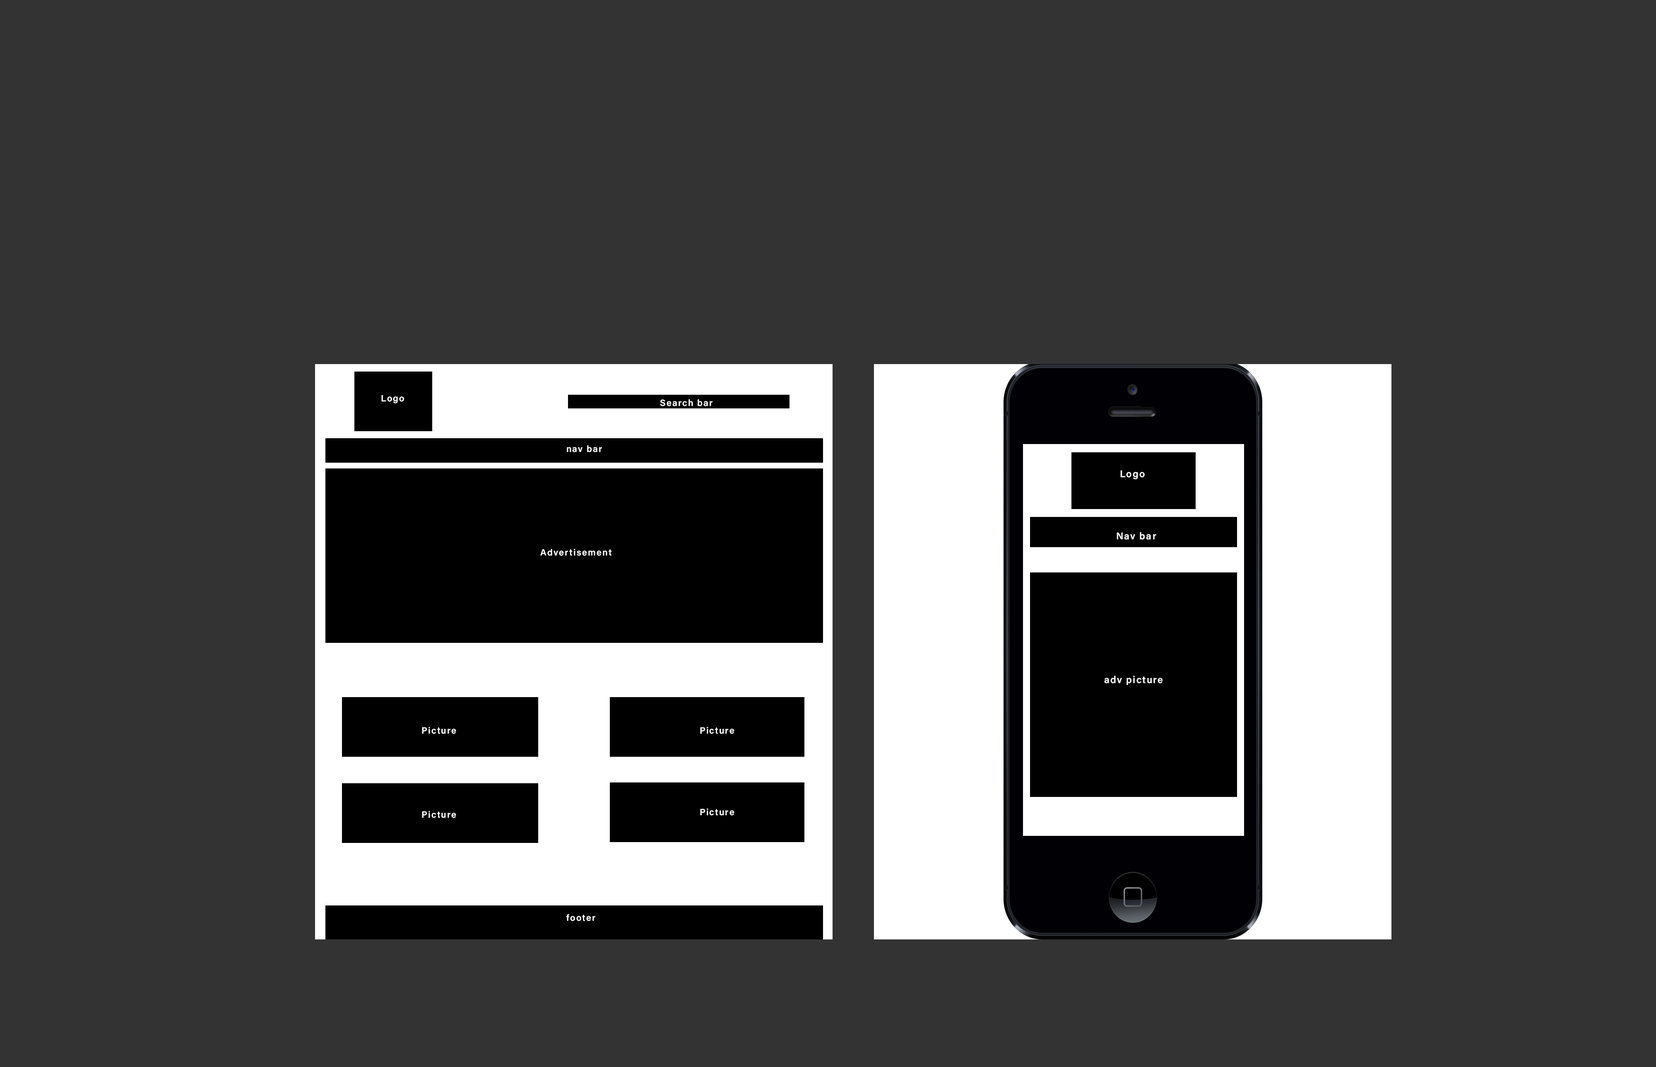
<style>
.page{position:relative;width:1656px;height:1067px;background:#333333}
.page>*{position:absolute;margin:0}
.t1{font:9px "AcuminConcept-Semibold";letter-spacing:0.1em;color:#ffffff}
.t2{font:9.7px "AcuminConcept-Semibold";letter-spacing:0.1em;color:#ffffff}
</style>
<div class="page">
<p class="t1" style="left:381px;top:395px;width:23px;height:8px">Logo</p>
<p class="t1" style="left:660px;top:399px;width:53px;height:7px">Search bar</p>
<p class="t1" style="left:567px;top:445px;width:35px;height:7px">nav bar</p>
<p class="t2" style="left:1120px;top:470px;width:25px;height:9px">Logo</p>
<p class="t2" style="left:1117px;top:532px;width:39px;height:7px">Nav bar</p>
<p class="t1" style="left:540px;top:549px;width:72px;height:7px">Advertisement</p>
<p class="t2" style="left:1104px;top:675px;width:59px;height:10px">adv picture</p>
<p class="t1" style="left:422px;top:727px;width:34px;height:7px">Picture</p>
<p class="t1" style="left:700px;top:727px;width:34px;height:7px">Picture</p>
<p class="t1" style="left:700px;top:808px;width:34px;height:7px">Picture</p>
<p class="t1" style="left:422px;top:811px;width:34px;height:7px">Picture</p>
<p class="t1" style="left:566px;top:913px;width:29px;height:8px">footer</p>
</div>
